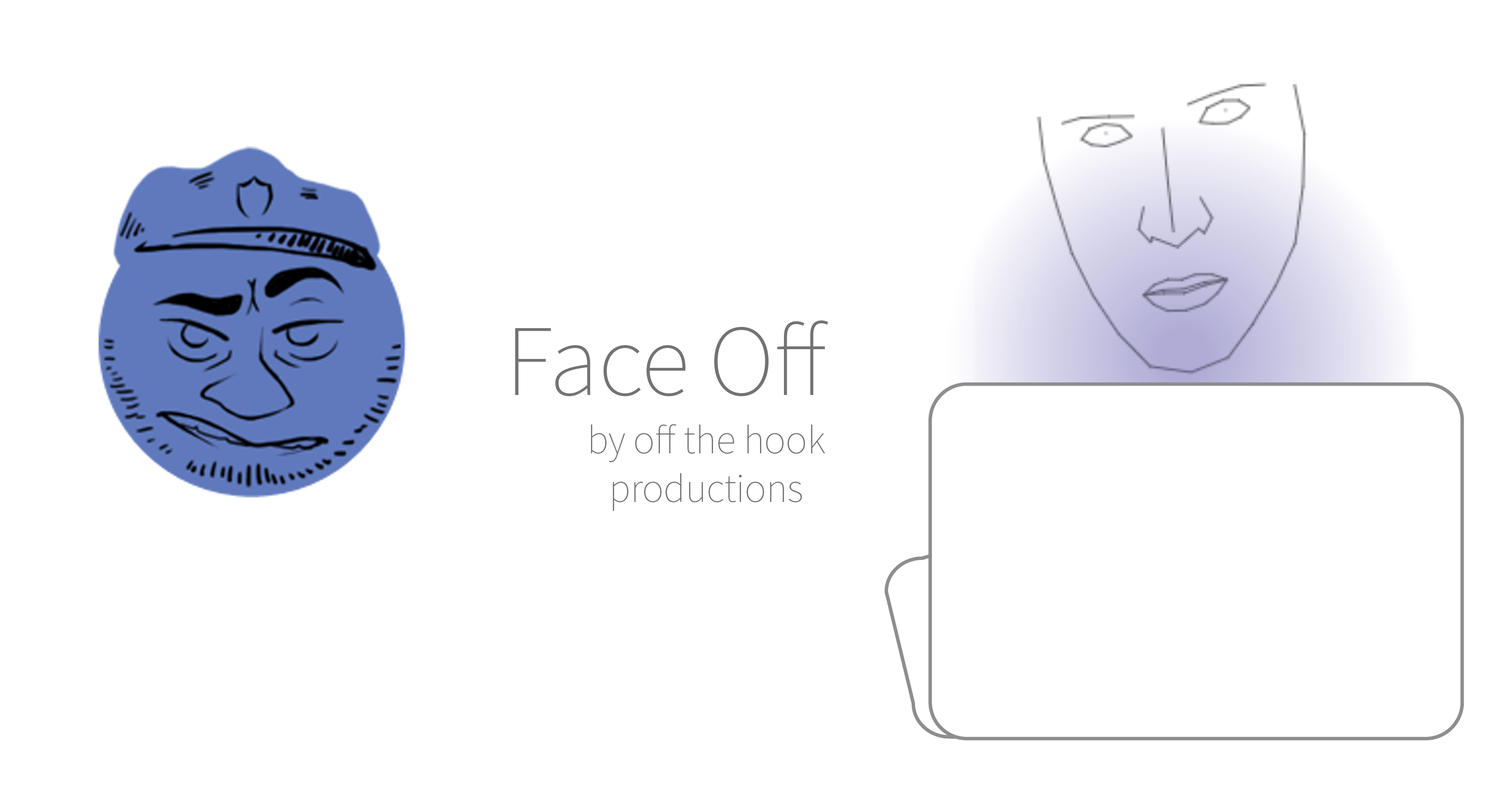
<style>
.page{position:relative;width:1501px;height:794px;background:#ffffff}
.page>*{position:absolute;margin:0}
.t1{font:101.3px "SourceSansPro-ExtraLight";letter-spacing:-0.005em;color:#737373}
.t2{font:40.5px "SourceSansPro-ExtraLight";letter-spacing:-0.005em;color:#737373}
</style>
<div class="page">
<p class="t1" style="left:515px;top:321px;width:313px;height:75px">Face Off</p>
<p class="t2" style="left:591px;top:424px;width:234px;height:87px;text-align:center">by off the hook <br>productions</p>
</div>
